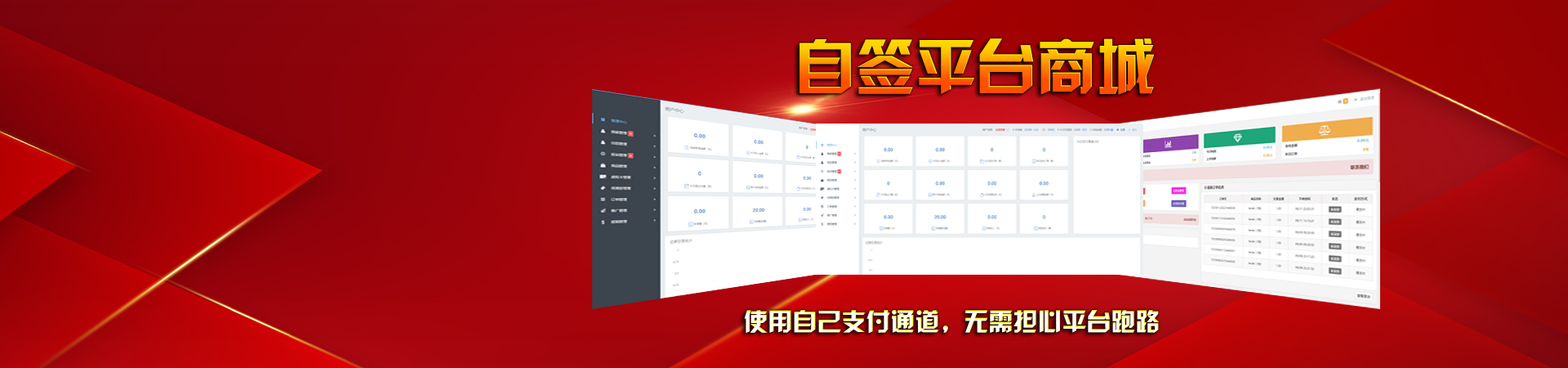
<style>
.page{position:relative;width:1568px;height:368px}
.page>*{position:absolute;margin:0}
.t1{font:60px "HYk2gj";text-transform:uppercase}
.t2{font:24.5px "HYk2gj";color:#ffffff;text-transform:uppercase}
</style>
<div class="page">
<p class="t1" style="left:800px;top:38px;width:354px;height:57px">自签平台商城</p>
<p class="t2" style="left:744px;top:310px;width:415px;height:23px">使用自己支付通道，无需担心平台跑路</p>
</div>
